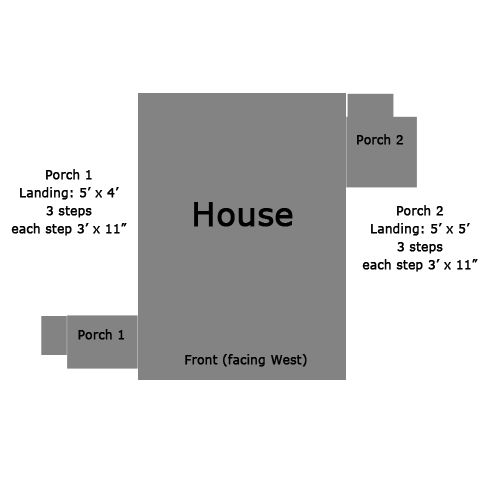
<style>
.page{position:relative;width:500px;height:500px;background:#ffffff}
.page>*{position:absolute;margin:0}
.t1{font:12px "Verdana";color:#010001;font-weight:bold}
.t2{font:12px/18px "Verdana";color:#010001;font-weight:bold}
.t3{font:32px "Verdana";color:#010001;font-weight:bold}
</style>
<div class="page">
<p class="t1" style="left:357px;top:134px;width:47px;height:11px">Porch 2</p>
<p class="t2" style="left:11px;top:169px;width:116px;height:67px;text-align:center">Porch 1<br>Landing: 5’ x 4’<br>3 steps<br>each step 3’ x 11”</p>
<p class="t3" style="left:194px;top:202px;width:99px;height:25px">House</p>
<p class="t2" style="left:362px;top:205px;width:116px;height:67px;text-align:center">Porch 2<br>Landing: 5’ x 5’<br>3 steps<br>each step 3’ x 11”</p>
<p class="t1" style="left:78px;top:329px;width:47px;height:11px">Porch 1</p>
<p class="t1" style="left:185px;top:354px;width:122px;height:13px">Front (facing West)</p>
</div>
